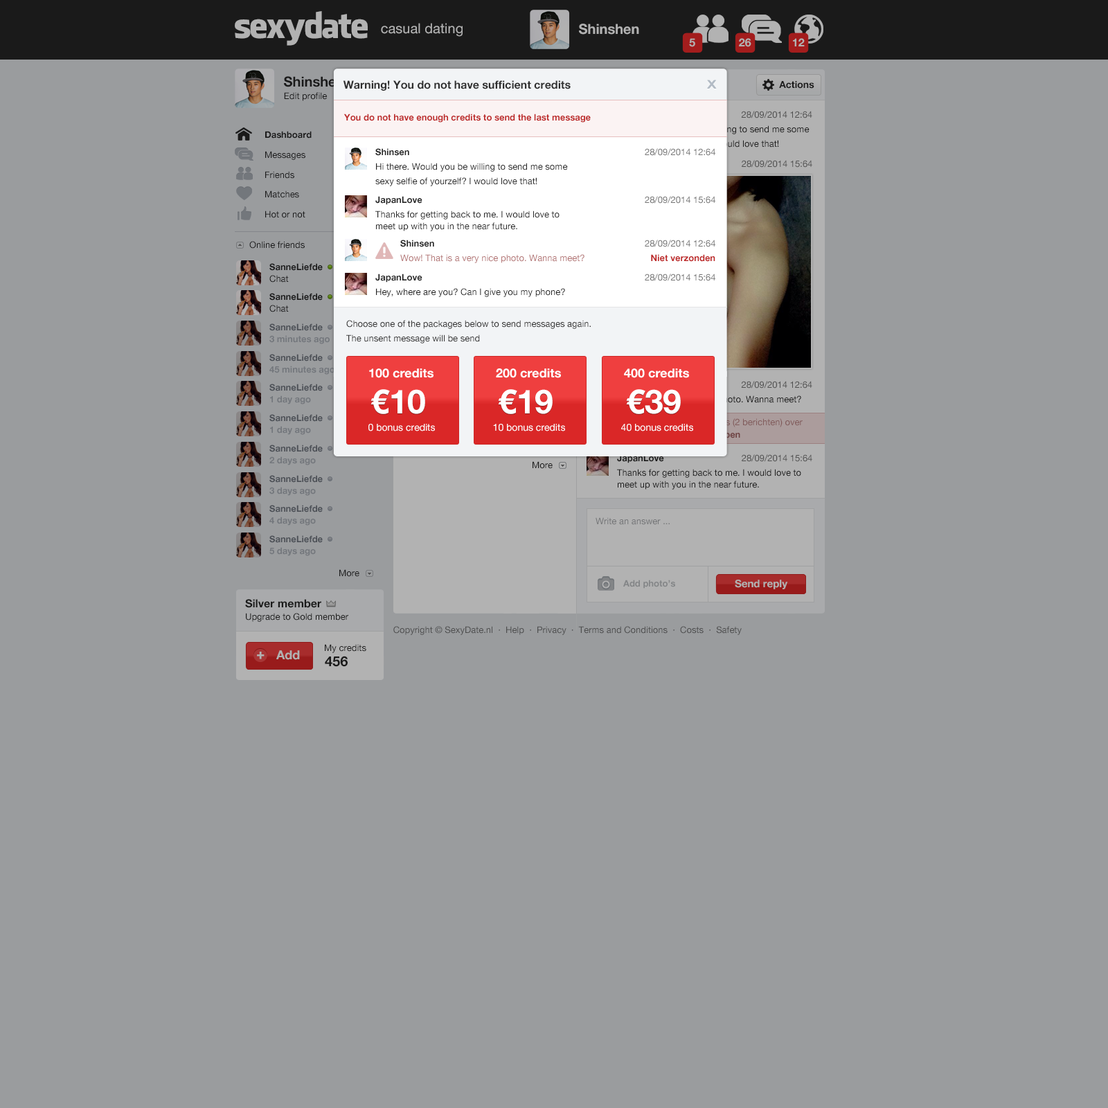
<style>
.page{position:relative;width:1108px;height:1108px;background:#9a9c9e}
.page>*{position:absolute;margin:0}
.t1{font:34.6px "FacebookLetterFaces";letter-spacing:-0.05em;color:#b2b2b2}
.t2{font:13.8px "HelveticaNeue";color:#b2b2b2}
.t3{font:13.8px "HelveticaNeue-Bold";color:#b2b2b2}
.t4{font:11.1px "HelveticaNeue-Bold";color:#b2b2b2}
.t5{font:13.8px "HelveticaNeue-Bold";color:#252525}
.t6{font:11.1px "HelveticaNeue-Bold";color:#2f2f2f}
.t7{font:12.5px "Days";color:#b2bbc5}
.t8{font:9.7px "HelveticaNeue-Bold";color:#252525}
.t9{font:9px "HelveticaNeue";color:#252525}
.t10{font:9px "HelveticaNeue-Bold";color:#bd2727}
.t11{font:9px/20px "HelveticaNeue";color:#252525}
.t12{font:9px/20px "HelveticaNeue-Bold";color:#252525}
.t13{font:9px/14.5px "HelveticaNeue";color:#252525}
.t14{font:9px/11.8px "HelveticaNeue-Bold";color:#252525}
.t15{font:9px/11.8px "HelveticaNeue";color:#737373}
.t16{font:9px/11.8px "HelveticaNeue";color:#252525}
.t17{font:9px "HelveticaNeue-Bold";color:#a5aab2}
.t18{font:9px/14.5px "HelveticaNeue";color:#b47676}
.t19{font:9px/14.5px "HelveticaNeue-Bold";color:#bd2727}
.t20{font:9px/11.8px "HelveticaNeue-Bold";color:#a5aab2}
.t21{font:9px/11.8px "HelveticaNeue-Bold"}
.t22{font:9px/14.5px "HelveticaNeue";color:#2f2f2f}
.t23{font:12.5px "HelveticaNeue-Bold";color:#ffffff}
.t24{font:33.2px "HelveticaNeue-Bold";color:#ffffff}
.t25{font:9px/14.5px "HelveticaNeue"}
.t26{font:9px/11.8px "HelveticaNeue"}
.t27{font:9.7px "HelveticaNeue";color:#ffffff}
.t28{font:9px "HelveticaNeue";color:#747577}
.t29{font:9px "HelveticaNeue-Bold";color:#838587}
.t30{font:10.4px "HelveticaNeue-Bold";color:#b2b2b2}
.t31{font:11.1px "HelveticaNeue-Bold";color:#252525}
.t32{font:9px "HelveticaNeue";color:#4e4e4e}
.t33{font:13.2px "HelveticaNeue-Bold";color:#b2b2b2;font-weight:bold}
.t34{font:12.5px "HelveticaNeue-Bold";color:#b2b2b2}
</style>
<div class="page">
<p class="t1" style="left:235px;top:11px;width:133px;height:35px">sexydate</p>
<p class="t2" style="left:381px;top:23px;width:81px;height:14px">casual dating</p>
<p class="t3" style="left:579px;top:24px;width:60px;height:11px">Shinshen</p>
<p class="t4" style="left:689px;top:38px;width:6px;height:9px">5</p>
<p class="t4" style="left:739px;top:38px;width:12px;height:9px">26</p>
<p class="t4" style="left:793px;top:38px;width:11px;height:8px">12</p>
<p class="t5" style="left:284px;top:76px;width:60px;height:11px">Shinshen</p>
<p class="t6" style="left:343px;top:80px;width:227px;height:11px">Warning! You do not have sufficient credits</p>
<p class="t7" style="left:707px;top:80px;width:10px;height:9px">X</p>
<p class="t8" style="left:779px;top:81px;width:35px;height:8px">Actions</p>
<p class="t9" style="left:284px;top:92px;width:43px;height:9px">Edit profile</p>
<p class="t10" style="left:343px;top:114px;width:248px;height:9px">You do not have enough credits to send the last message</p>
<p class="t11" style="left:265px;top:131px;width:47px;height:87px"><span class="t12">Dashboard<br></span>Messages<br>Friends<br>Matches<br>Hot or not</p>
<p class="t13" style="left:375px;top:148px;width:340px;height:38px"><span class="t14">Shinsen                                                  </span><span class="t15">28/09/2014 12:64<br></span>Hi there. Would you be willing to send me some<br>sexy selfie of yourzelf? I would love that!</p>
<p class="t13" style="left:375px;top:196px;width:340px;height:35px"><span class="t14">JapanLove                                             </span><span class="t15">28/09/2014 15:64<br></span>Thanks for getting back to me. I would love to<br><span class="t16">meet up with you in the near future.</span></p>
<p class="t9" style="left:249px;top:241px;width:123px;height:8px">Online friends      <span class="t17">2</span></p>
<p class="t18" style="left:400px;top:240px;width:315px;height:23px"><span class="t14"> Shinsen                                        </span><span class="t15">28/09/2014 12:64<br> </span>Wow! That is a very nice photo. Wanna meet?                           <span class="t19">Niet verzonden</span></p>
<p class="t14" style="left:269px;top:263px;width:103px;height:19px">SanneLiefde          <span class="t20">online<br></span><span class="t16">Chat</span></p>
<p class="t13" style="left:375px;top:273px;width:340px;height:24px"><span class="t14">JapanLove                                             </span><span class="t15">28/09/2014 15:64<br></span>Hey, where are you? Can I give you my phone?</p>
<p class="t14" style="left:269px;top:293px;width:103px;height:19px">SanneLiefde          <span class="t20">online<br></span><span class="t16">Chat</span></p>
<p class="t21" style="left:269px;top:323px;width:61px;height:21px">SanneLiefde<br>3 minutes ago</p>
<p class="t22" style="left:346px;top:320px;width:245px;height:23px">Choose one of the packages below to send messages again. <br>The unsent message will be send</p>
<p class="t21" style="left:269px;top:354px;width:66px;height:21px">SanneLiefde<br>45 minutes ago</p>
<p class="t23" style="left:369px;top:368px;width:64px;height:10px">100 credits</p>
<p class="t23" style="left:496px;top:368px;width:65px;height:10px">200 credits</p>
<p class="t23" style="left:624px;top:368px;width:65px;height:10px">400 credits</p>
<p class="t21" style="left:269px;top:384px;width:54px;height:20px">SanneLiefde<br>1 day ago</p>
<p class="t24" style="left:370px;top:389px;width:55px;height:25px">€10</p>
<p class="t24" style="left:498px;top:389px;width:54px;height:25px">€19</p>
<p class="t25" style="left:617px;top:381px;width:195px;height:23px"><span class="t21">Shinsen                                    </span><span class="t26">28/09/2014 12:64<br></span>Wow! That is a very nice photo. Wanna meet?</p>
<p class="t24" style="left:626px;top:389px;width:55px;height:25px">€39</p>
<p class="t21" style="left:269px;top:414px;width:54px;height:21px">SanneLiefde<br>1 day ago</p>
<p class="t27" style="left:368px;top:424px;width:67px;height:7px">0 bonus credits</p>
<p class="t27" style="left:493px;top:424px;width:72px;height:7px">10 bonus credits</p>
<p class="t27" style="left:621px;top:424px;width:72px;height:7px">40 bonus credits</p>
<p class="t21" style="left:269px;top:444px;width:54px;height:21px">SanneLiefde<br>2 days ago</p>
<p class="t9" style="left:532px;top:461px;width:20px;height:8px">More</p>
<p class="t13" style="left:617px;top:454px;width:195px;height:35px"><span class="t14">JapanLove                               </span><span class="t15">28/09/2014 15:64<br></span>Thanks for getting back to me. I would love to<br><span class="t16">meet up with you in the near future.</span></p>
<p class="t21" style="left:269px;top:475px;width:54px;height:21px">SanneLiefde<br>3 days ago</p>
<p class="t21" style="left:269px;top:505px;width:54px;height:20px">SanneLiefde<br>4 days ago</p>
<p class="t28" style="left:595px;top:517px;width:74px;height:8px">Write an answer ...</p>
<p class="t21" style="left:269px;top:535px;width:54px;height:21px">SanneLiefde<br>5 days ago</p>
<p class="t9" style="left:339px;top:569px;width:20px;height:8px">More</p>
<p class="t29" style="left:623px;top:579px;width:52px;height:9px">Add photo’s</p>
<p class="t30" style="left:735px;top:579px;width:53px;height:10px">Send reply</p>
<p class="t31" style="left:245px;top:599px;width:76px;height:9px">Silver member</p>
<p class="t9" style="left:246px;top:613px;width:102px;height:9px">Upgrade to Gold member</p>
<p class="t32" style="left:393px;top:626px;width:348px;height:9px">Copyright © SexyDate.nl  ·  Help  ·  Privacy  ·  Terms and Conditions  ·  Costs  ·  Safety</p>
<p class="t33" style="left:257px;top:651px;width:7px;height:8px">+</p>
<p class="t34" style="left:276px;top:650px;width:24px;height:10px">Add</p>
<p class="t9" style="left:325px;top:644px;width:41px;height:9px">My credits</p>
<p class="t5" style="left:325px;top:656px;width:23px;height:11px">456</p>
</div>
